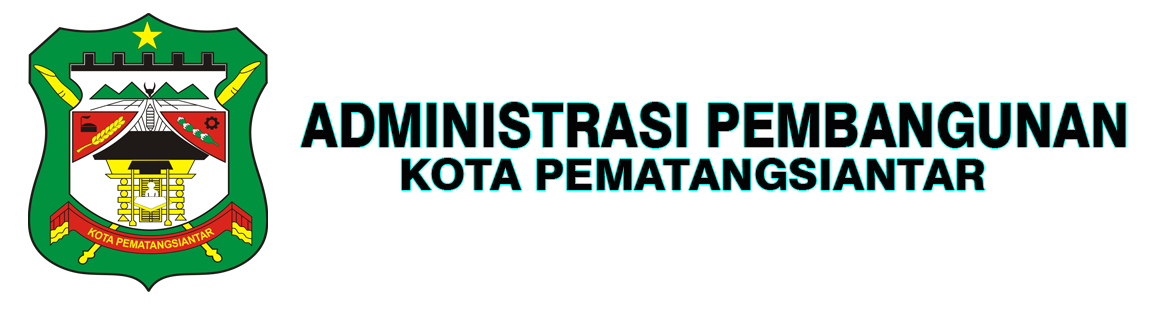
<style>
.page{position:relative;width:1153px;height:312px;background:#ffffff}
.page>*{position:absolute;margin:0}
.t1{font:61.5px "Swiss721BT-Heavy";color:#030303;scale:0.83 1}
.t2{font:43.7px "Swiss721BT-Heavy";color:#030303}
</style>
<div class="page">
<p class="t1" style="left:301px;top:102px;width:825px;height:46px">ADMINISTRASI PEMBANGUNAN</p>
<p class="t2" style="left:401px;top:158px;width:584px;height:32px">KOTA PEMATANGSIANTAR</p>
</div>
